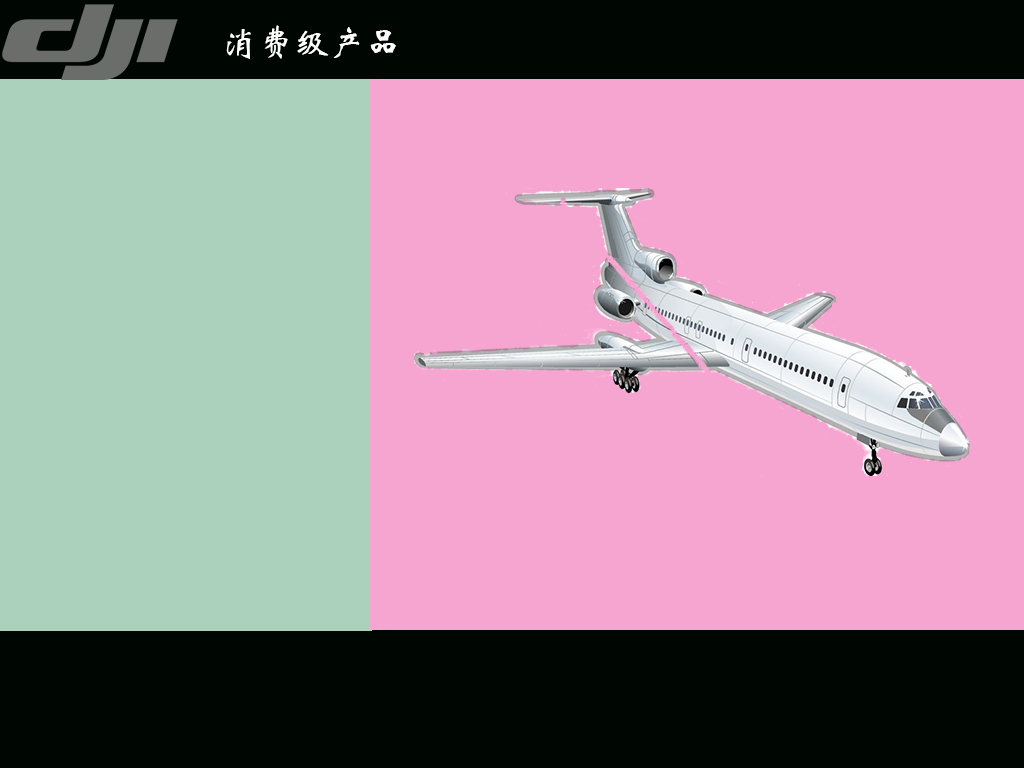
<style>
.page{position:relative;width:1024px;height:768px;background:#f6a5d1}
.page>*{position:absolute;margin:0}
.t1{font:36px "STXinwei";color:#ffffff}
</style>
<div class="page">
<p class="t1" style="left:226px;top:25px;width:170px;height:34px">消费级产品</p>
</div>
